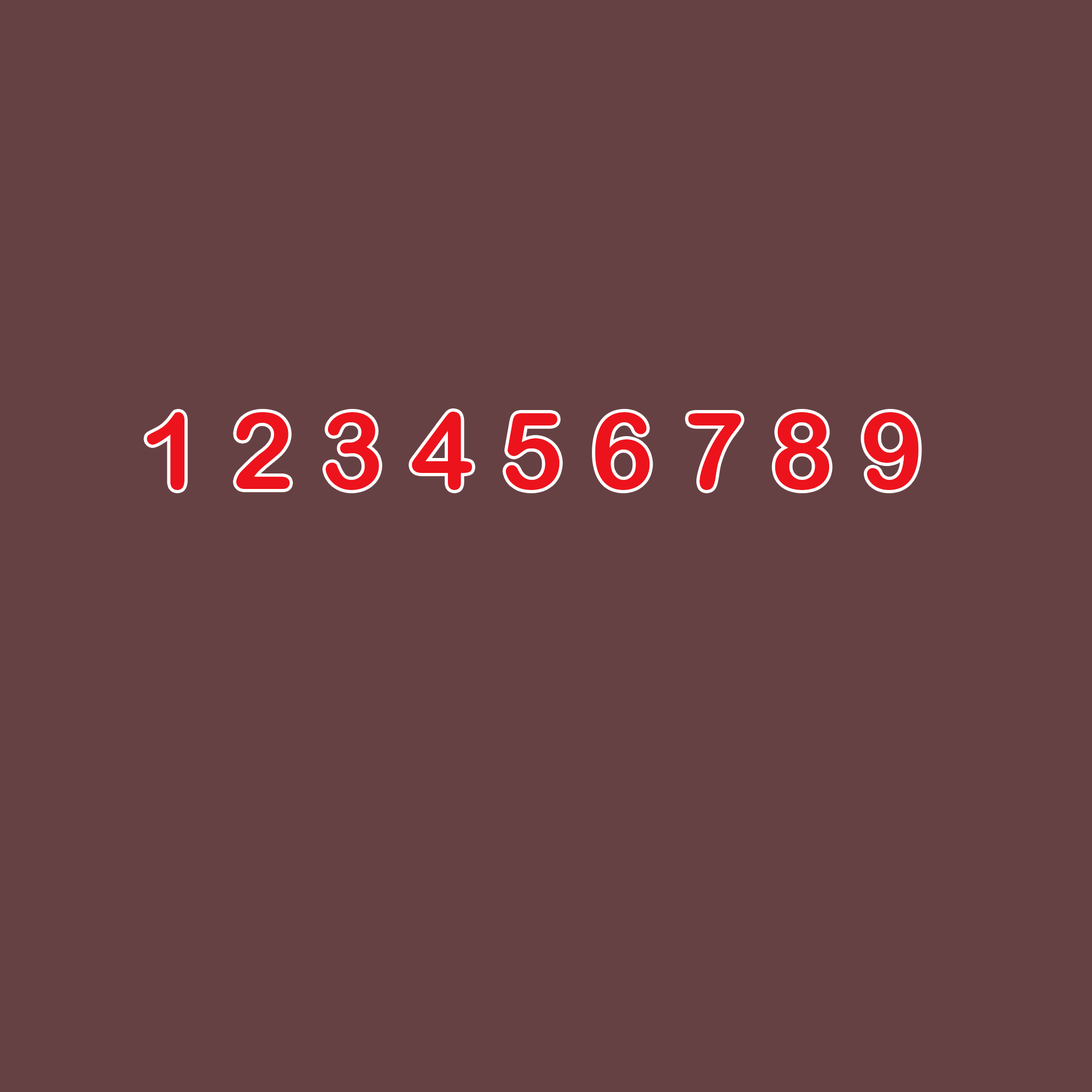
<style>
.page{position:relative;width:1092px;height:1092px;background:#664143}
.page>*{position:absolute;margin:0}
.t1{font:106.6px "ArialRoundedMTBold";color:#ec131c}
</style>
<div class="page">
<p class="t1" style="left:147px;top:412px;width:772px;height:78px">1 2 3 4 5 6 7 8 9</p>
</div>
